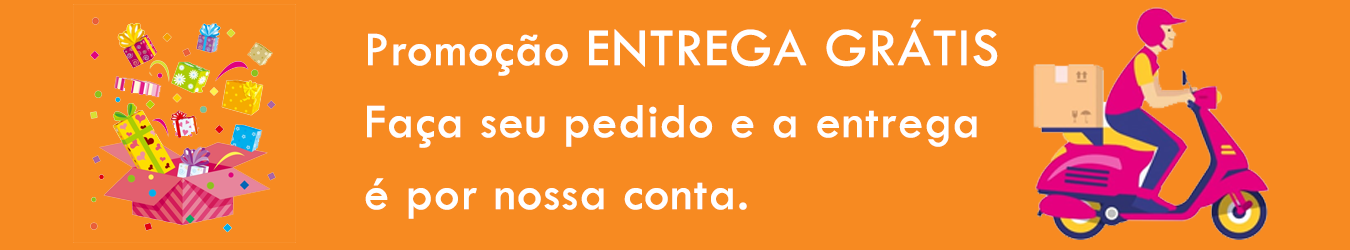
<style>
.page{position:relative;width:1350px;height:250px;background:#f78a21}
.page>*{position:absolute;margin:0}
.t1{font:50px/72px "TwCenMT-Regular";color:#ffffff;font-weight:bold}
.t2{font:55px/72px "TwCenMT-Regular";color:#ffffff;font-weight:bold}
</style>
<div class="page">
<p class="t1" style="left:365px;top:19px;width:633px;height:200px">Promoção <span class="t2">ENTREGA GRÁTIS<br></span>Faça seu pedido e a entrega<br>é por nossa conta.</p>
</div>
